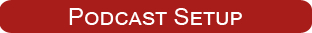
<style>
.page{position:relative;width:312px;height:33px;background:#a81d1a}
.page>*{position:absolute;margin:0}
.t1{font:24px "ArialMT";color:#ffffff;font-variant:small-caps}
</style>
<div class="page">
<p class="t1" style="left:69px;top:8px;width:173px;height:17px">Podcast Setup</p>
</div>
